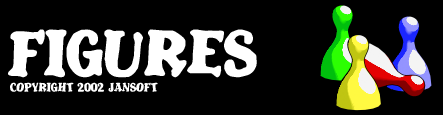
<style>
.page{position:relative;width:443px;height:115px;background:#000000}
.page>*{position:absolute;margin:0}
.t1{font:30px "GasHufferPhat";color:#ffffff}
.t2{font:48px "Blatant";color:#ffffff}
.t3{font:9px "Blatant";color:#ffffff}
</style>
<div class="page">
<p class="t1" style="left:8px;top:29px;width:249px;height:49px"><span class="t2">Figures<br><br></span>NEW GAME<br>NETWORK<br>OPTIONS<br>HIGH SCORE<br>EXIT</p>
<p class="t3" style="left:10px;top:82px;width:148px;height:10px">Copyright 2002 Jansoft</p>
</div>
